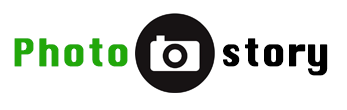
<style>
.page{position:relative;width:347px;height:110px;background:#ffffff}
.page>*{position:absolute;margin:0}
.t1{font:36px "Silom";color:#21a70a;font-weight:bold}
.t2{font:36px "Silom";color:#000000;font-weight:bold}
</style>
<div class="page">
<p class="t1" style="left:14px;top:38px;width:314px;height:38px">Photo         <span class="t2">story</span></p>
</div>
